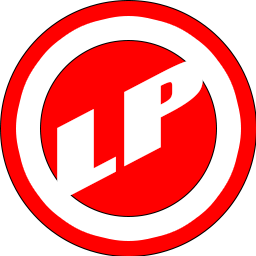
<style>
.page{position:relative;width:256px;height:256px;background:#ffffff}
.page>*{position:absolute;margin:0}
.t1{font:93.7px "Impact";color:#ffffff;scale:2.13 1}
</style>
<div class="page">
<p class="t1" style="left:57px;top:59px;width:146px;height:144px;rotate:-28deg">LP</p>
</div>
